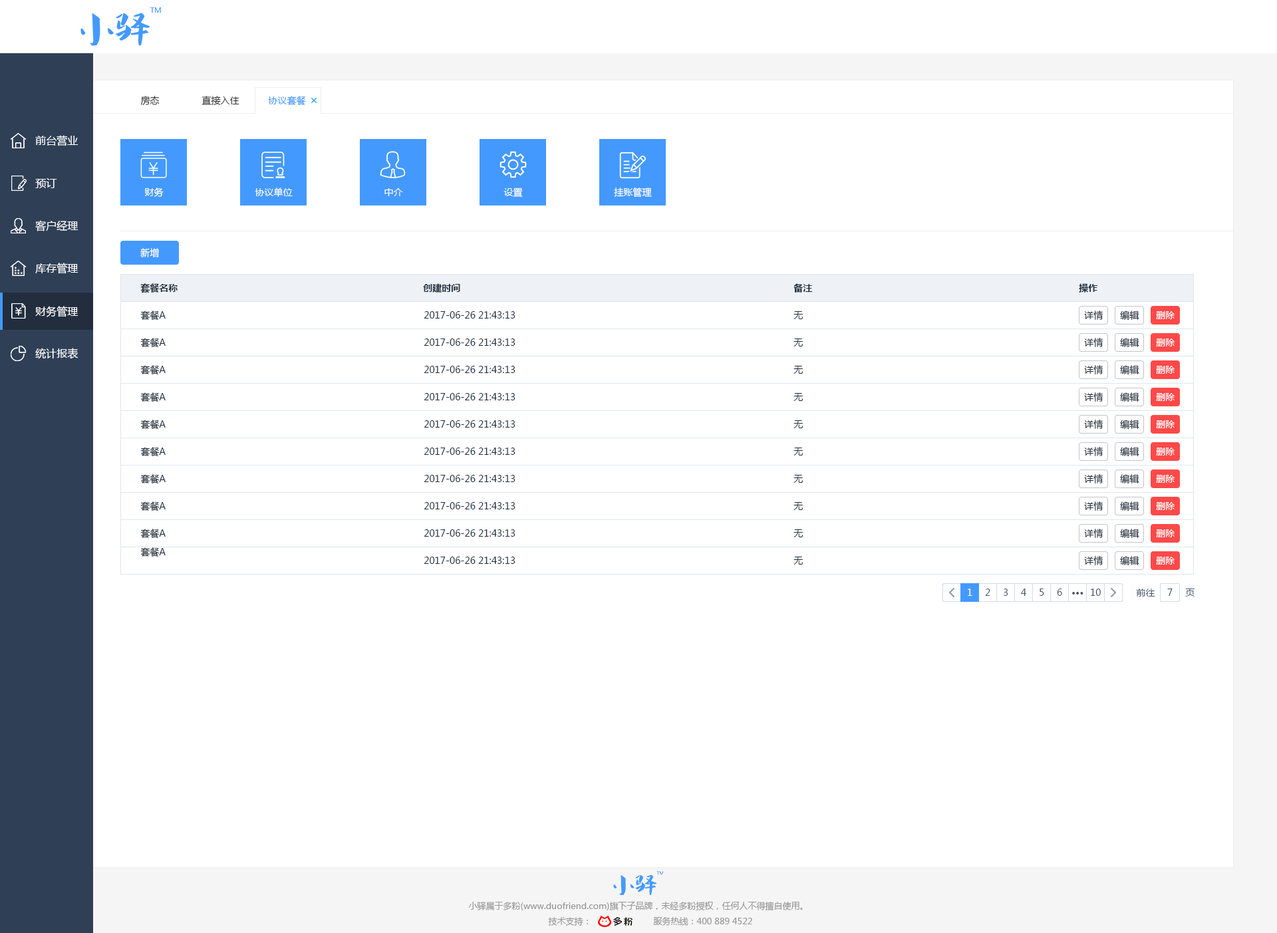
<style>
.page{position:relative;width:1277px;height:933px;background:#ffffff}
.page>*{position:absolute;margin:0}
.t1{font:9.3px "MicrosoftYaHei";color:#333333}
.t2{font:9.3px "MicrosoftYaHei";color:#4499ff}
.t3{font:10.6px "MicrosoftYaHei";color:#ffffff}
.t4{font:9.3px "MicrosoftYaHei";color:#ffffff}
.t5{font:9.3px "MicrosoftYaHei-Bold";color:#1f2d3d}
.t6{font:9.3px "MicrosoftYaHei";color:#1f2d3d}
.t7{font:9.3px "MicrosoftYaHei";color:#48576a}
.t8{font:9.3px "MicrosoftYaHei-Bold";color:#48576a}
.t9{font:8.6px "MicrosoftYaHei";color:#999999}
</style>
<div class="page">
<p class="t1" style="left:140px;top:96px;width:20px;height:9px">房态</p>
<p class="t1" style="left:202px;top:96px;width:38px;height:9px">直接入住</p>
<p class="t2" style="left:268px;top:96px;width:38px;height:10px">协议套餐</p>
<p class="t3" style="left:35px;top:135px;width:44px;height:11px">前台营业</p>
<p class="t3" style="left:35px;top:178px;width:22px;height:10px">预订</p>
<p class="t4" style="left:144px;top:188px;width:20px;height:9px">财务</p>
<p class="t4" style="left:255px;top:188px;width:38px;height:9px">协议单位</p>
<p class="t4" style="left:385px;top:188px;width:18px;height:8px">中介</p>
<p class="t4" style="left:504px;top:188px;width:19px;height:9px">设置</p>
<p class="t4" style="left:614px;top:188px;width:38px;height:10px">挂账管理</p>
<p class="t3" style="left:35px;top:220px;width:44px;height:12px">客户经理</p>
<p class="t4" style="left:140px;top:248px;width:19px;height:9px">新增</p>
<p class="t3" style="left:35px;top:263px;width:44px;height:11px">库存管理</p>
<p class="t5" style="left:140px;top:283px;width:38px;height:10px">套餐名称</p>
<p class="t5" style="left:423px;top:283px;width:37px;height:10px">创建时间</p>
<p class="t5" style="left:794px;top:283px;width:19px;height:10px">备注</p>
<p class="t5" style="left:1079px;top:283px;width:19px;height:10px">操作</p>
<p class="t3" style="left:35px;top:306px;width:44px;height:11px">财务管理</p>
<p class="t6" style="left:140px;top:311px;width:26px;height:10px">套餐A</p>
<p class="t6" style="left:424px;top:311px;width:92px;height:8px">2017-06-26 21:43:13</p>
<p class="t6" style="left:794px;top:311px;width:9px;height:8px">无</p>
<p class="t6" style="left:1084px;top:311px;width:20px;height:9px">详情</p>
<p class="t6" style="left:1120px;top:311px;width:20px;height:9px">编辑</p>
<p class="t4" style="left:1156px;top:311px;width:20px;height:8px">删除</p>
<p class="t6" style="left:140px;top:338px;width:26px;height:10px">套餐A</p>
<p class="t6" style="left:424px;top:339px;width:92px;height:7px">2017-06-26 21:43:13</p>
<p class="t6" style="left:794px;top:339px;width:9px;height:8px">无</p>
<p class="t6" style="left:1084px;top:338px;width:20px;height:9px">详情</p>
<p class="t6" style="left:1120px;top:338px;width:20px;height:9px">编辑</p>
<p class="t4" style="left:1156px;top:339px;width:20px;height:8px">删除</p>
<p class="t3" style="left:35px;top:348px;width:44px;height:11px">统计报表</p>
<p class="t6" style="left:140px;top:365px;width:26px;height:10px">套餐A</p>
<p class="t6" style="left:424px;top:366px;width:92px;height:7px">2017-06-26 21:43:13</p>
<p class="t6" style="left:794px;top:366px;width:9px;height:8px">无</p>
<p class="t6" style="left:1084px;top:365px;width:20px;height:10px">详情</p>
<p class="t6" style="left:1120px;top:365px;width:20px;height:10px">编辑</p>
<p class="t4" style="left:1156px;top:366px;width:20px;height:8px">删除</p>
<p class="t6" style="left:140px;top:393px;width:26px;height:10px">套餐A</p>
<p class="t6" style="left:424px;top:393px;width:92px;height:8px">2017-06-26 21:43:13</p>
<p class="t6" style="left:794px;top:393px;width:9px;height:8px">无</p>
<p class="t6" style="left:1084px;top:393px;width:20px;height:9px">详情</p>
<p class="t6" style="left:1120px;top:393px;width:20px;height:9px">编辑</p>
<p class="t4" style="left:1156px;top:393px;width:20px;height:8px">删除</p>
<p class="t6" style="left:140px;top:420px;width:26px;height:10px">套餐A</p>
<p class="t6" style="left:424px;top:420px;width:92px;height:8px">2017-06-26 21:43:13</p>
<p class="t6" style="left:794px;top:420px;width:9px;height:8px">无</p>
<p class="t6" style="left:1084px;top:420px;width:20px;height:9px">详情</p>
<p class="t6" style="left:1120px;top:420px;width:20px;height:9px">编辑</p>
<p class="t4" style="left:1156px;top:420px;width:20px;height:8px">删除</p>
<p class="t6" style="left:140px;top:447px;width:26px;height:10px">套餐A</p>
<p class="t6" style="left:424px;top:448px;width:92px;height:7px">2017-06-26 21:43:13</p>
<p class="t6" style="left:794px;top:448px;width:9px;height:8px">无</p>
<p class="t6" style="left:1084px;top:447px;width:20px;height:9px">详情</p>
<p class="t6" style="left:1120px;top:447px;width:20px;height:9px">编辑</p>
<p class="t4" style="left:1156px;top:448px;width:20px;height:8px">删除</p>
<p class="t6" style="left:140px;top:474px;width:26px;height:10px">套餐A</p>
<p class="t6" style="left:424px;top:475px;width:92px;height:7px">2017-06-26 21:43:13</p>
<p class="t6" style="left:794px;top:475px;width:9px;height:8px">无</p>
<p class="t6" style="left:1084px;top:474px;width:20px;height:10px">详情</p>
<p class="t6" style="left:1120px;top:474px;width:20px;height:10px">编辑</p>
<p class="t4" style="left:1156px;top:475px;width:20px;height:8px">删除</p>
<p class="t6" style="left:140px;top:502px;width:26px;height:10px">套餐A</p>
<p class="t6" style="left:424px;top:502px;width:92px;height:8px">2017-06-26 21:43:13</p>
<p class="t6" style="left:794px;top:502px;width:9px;height:8px">无</p>
<p class="t6" style="left:1084px;top:502px;width:20px;height:9px">详情</p>
<p class="t6" style="left:1120px;top:502px;width:20px;height:9px">编辑</p>
<p class="t4" style="left:1156px;top:502px;width:20px;height:8px">删除</p>
<p class="t6" style="left:140px;top:529px;width:26px;height:10px">套餐A</p>
<p class="t6" style="left:424px;top:530px;width:92px;height:7px">2017-06-26 21:43:13</p>
<p class="t6" style="left:794px;top:530px;width:9px;height:8px">无</p>
<p class="t6" style="left:1084px;top:529px;width:20px;height:9px">详情</p>
<p class="t6" style="left:1120px;top:529px;width:20px;height:9px">编辑</p>
<p class="t4" style="left:1156px;top:530px;width:20px;height:8px">删除</p>
<p class="t6" style="left:140px;top:548px;width:26px;height:10px">套餐A</p>
<p class="t6" style="left:424px;top:557px;width:92px;height:7px">2017-06-26 21:43:13</p>
<p class="t6" style="left:794px;top:557px;width:9px;height:8px">无</p>
<p class="t6" style="left:1084px;top:556px;width:20px;height:10px">详情</p>
<p class="t6" style="left:1120px;top:556px;width:20px;height:10px">编辑</p>
<p class="t4" style="left:1156px;top:557px;width:20px;height:8px">删除</p>
<p class="t4" style="left:968px;top:589px;width:5px;height:7px">1</p>
<p class="t7" style="left:985px;top:589px;width:6px;height:7px">2</p>
<p class="t7" style="left:1003px;top:589px;width:6px;height:7px">3</p>
<p class="t7" style="left:1021px;top:589px;width:6px;height:7px">4</p>
<p class="t7" style="left:1040px;top:589px;width:5px;height:7px">5</p>
<p class="t7" style="left:1057px;top:589px;width:6px;height:7px">6</p>
<p class="t8" style="left:1073px;top:592px;width:11px;height:3px">···</p>
<p class="t7" style="left:1091px;top:589px;width:10px;height:7px">10</p>
<p class="t7" style="left:1136px;top:589px;width:20px;height:8px">前往</p>
<p class="t7" style="left:1168px;top:589px;width:5px;height:7px">7</p>
<p class="t7" style="left:1186px;top:589px;width:9px;height:8px">页</p>
<p class="t9" style="left:468px;top:902px;width:335px;height:9px">小驿属于多粉(www.duofriend.com)旗下子品牌，未经多粉授权，任何人不得擅自使用。</p>
<p class="t9" style="left:548px;top:917px;width:40px;height:9px">技术支持：</p>
<p class="t9" style="left:653px;top:917px;width:99px;height:9px">服务热线：400 889 4522</p>
</div>
